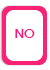
<style>
.page{position:relative;width:50px;height:70px;background:#ffffff}
.page>*{position:absolute;margin:0}
.t1{font:12px "ExpoM-HM";color:#f61b7d}
</style>
<div class="page">
<p class="t1" style="left:15px;top:29px;width:20px;height:9px">NO</p>
</div>
